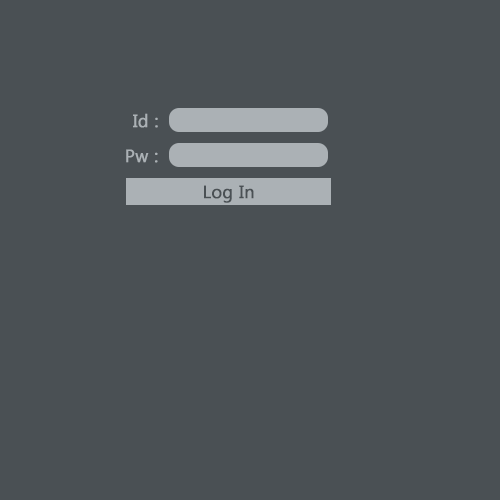
<style>
.page{position:relative;width:500px;height:500px;background:#4a5054}
.page>*{position:absolute;margin:0}
.t1{font:18px "Ebrima";color:#abb1b5;font-weight:bold}
.t2{font:18px "Ebrima";color:#4a5054;font-weight:bold}
</style>
<div class="page">
<p class="t1" style="left:133px;top:113px;width:25px;height:15px">Id :</p>
<p class="t1" style="left:126px;top:149px;width:32px;height:14px">Pw :</p>
<p class="t2" style="left:204px;top:185px;width:50px;height:18px">Log In</p>
</div>
